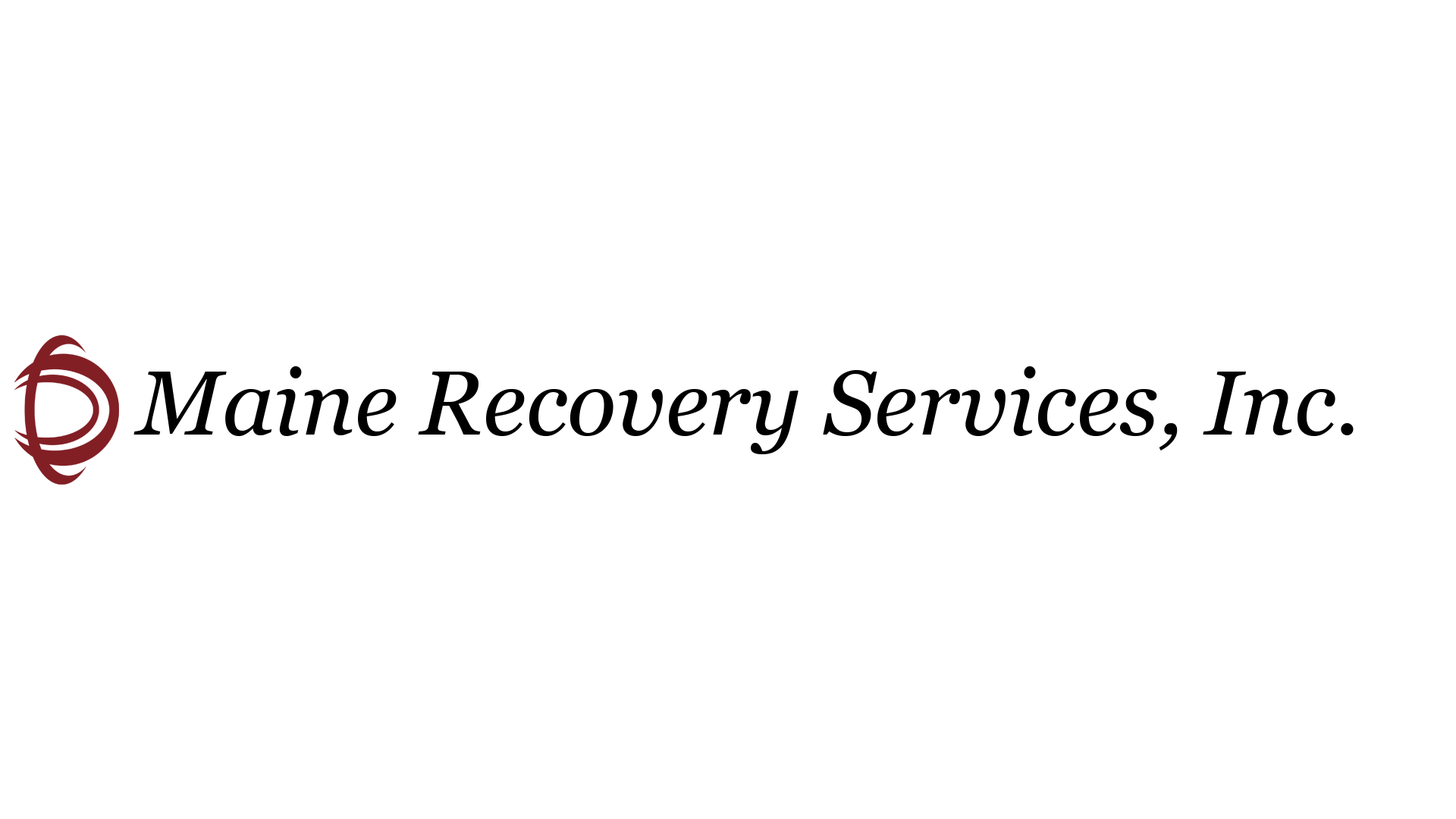
<style>
.page{position:relative;width:1456px;height:819px;background:#ffffff}
.page>*{position:absolute;margin:0}
.t1{font:91px "Georgia-Italic";color:#000000}
</style>
<div class="page">
<p class="t1" style="left:133px;top:366px;width:1221px;height:88px">Maine Recovery Services, Inc.</p>
</div>
